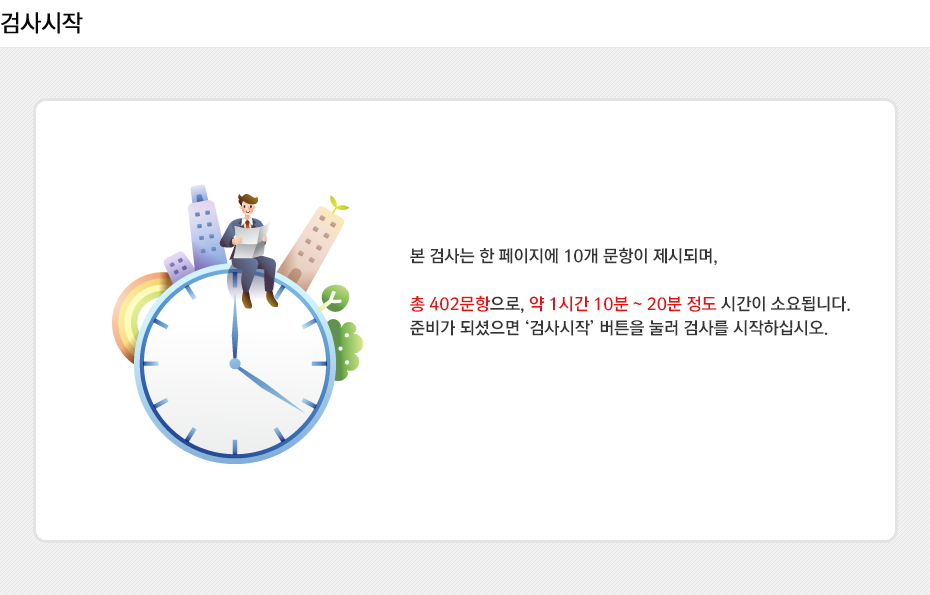
<style>
.page{position:relative;width:930px;height:595px;background:#ffffff}
.page>*{position:absolute;margin:0}
.t1{font:24px "YDIYGO120-KSCpc-EUC-H";letter-spacing:-0.075em;color:#070709;font-weight:bold;scale:0.9 1}
.t2{font:17px/24px "RixMGoB";letter-spacing:-0.01em;color:#353535}
.t3{font:17px/24px "RixMGoB";letter-spacing:-0.01em;color:#e21515}
</style>
<div class="page">
<p class="t1" style="left:1px;top:12px;width:82px;height:22px">검사시작</p>
<p class="t2" style="left:410px;top:247px;width:440px;height:89px">본 검사는 한 페이지에 10개 문항이 제시되며,<br>   <br><span class="t3">총 402문항</span>으로, <span class="t3">약 1시간 10분 ~ 20분 정도 </span>시간이 소요됩니다.<br>준비가 되셨으면 ‘검사시작’ 버튼을 눌러 검사를 시작하십시오.</p>
</div>
